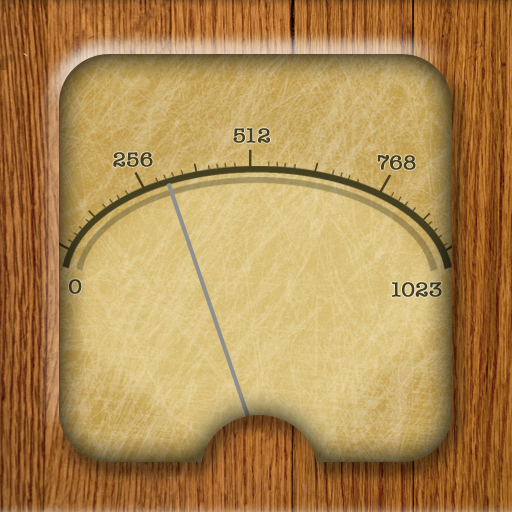
<style>
.page{position:relative;width:512px;height:512px}
.page>*{position:absolute;margin:0}
.t1{font:20.6px "AmericanTypewriter";color:#443f21;font-weight:bold}
</style>
<div class="page">
<p class="t1" style="left:233px;top:128px;width:37px;height:15px">512</p>
<p class="t1" style="left:113px;top:152px;width:40px;height:15px">256</p>
<p class="t1" style="left:377px;top:155px;width:39px;height:15px">768</p>
<p class="t1" style="left:69px;top:279px;width:13px;height:15px">0</p>
<p class="t1" style="left:391px;top:282px;width:51px;height:15px">1023</p>
</div>
